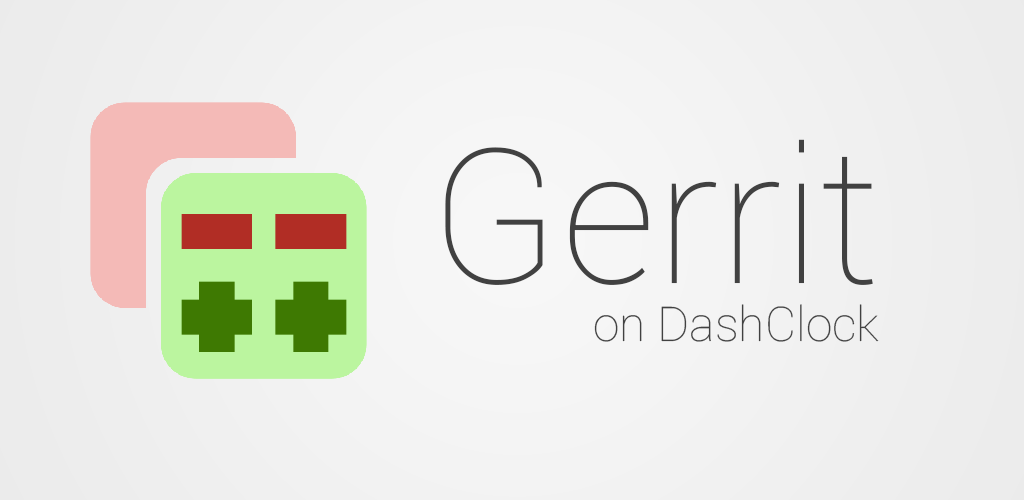
<style>
.page{position:relative;width:1024px;height:500px}
.page>*{position:absolute;margin:0}
.t1{font:48px "Roboto-Thin";color:#414141}
.t2{font:188px "Roboto-Thin";color:#414141}
</style>
<div class="page">
<p class="t1" style="left:445px;top:139px;width:434px;height:203px;text-align:right"><span class="t2">Gerrit<br></span>on DashClock</p>
</div>
